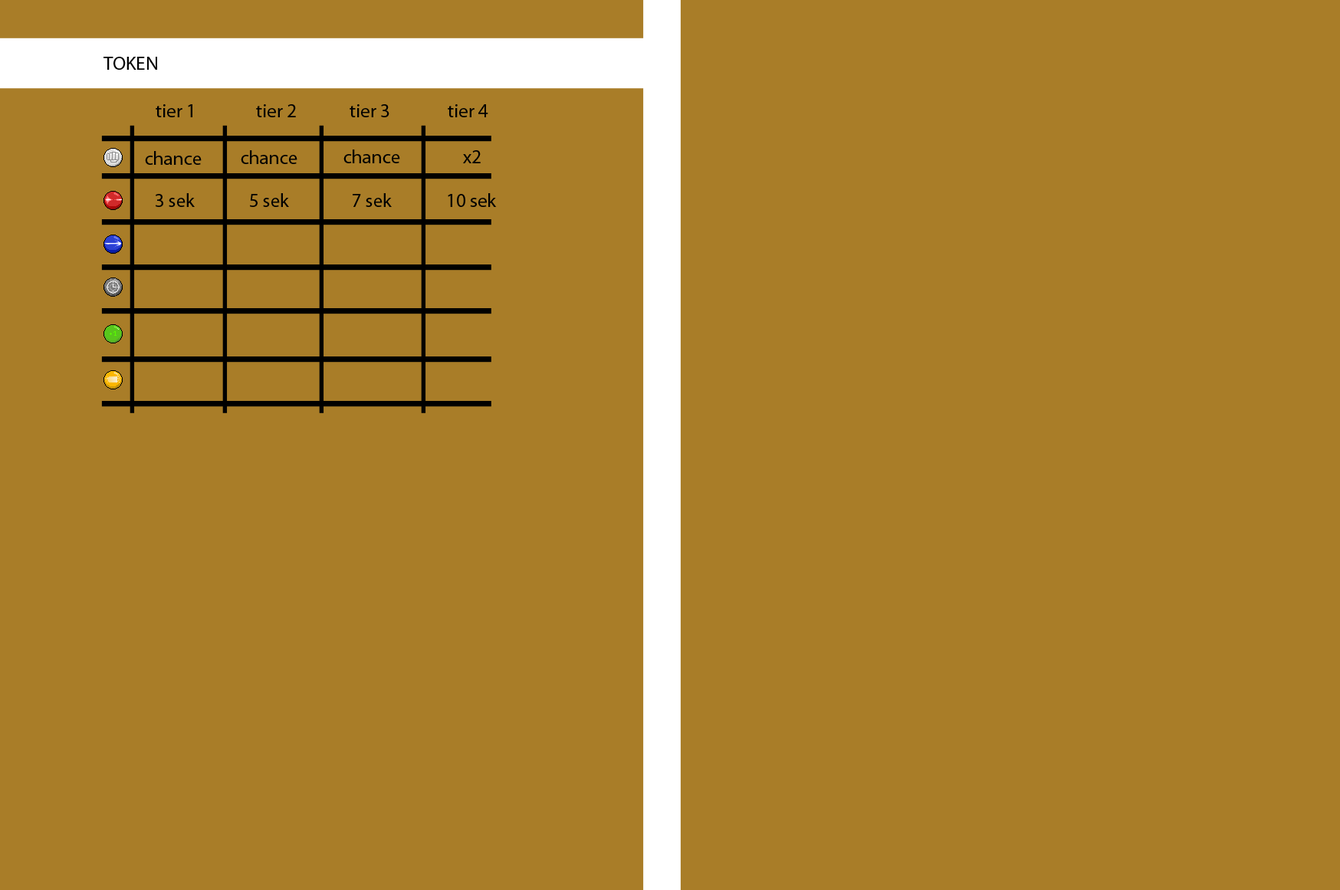
<style>
.page{position:relative;width:1340px;height:890px;background:#a97d28}
.page>*{position:absolute;margin:0}
.t1{font:19.2px "MyriadPro-Regular";color:#000000}
</style>
<div class="page">
<p class="t1" style="left:103px;top:57px;width:54px;height:13px">TOKEN</p>
<p class="t1" style="left:156px;top:104px;width:36px;height:13px">tier 1</p>
<p class="t1" style="left:256px;top:104px;width:40px;height:13px">tier 2</p>
<p class="t1" style="left:350px;top:104px;width:39px;height:13px">tier 3</p>
<p class="t1" style="left:448px;top:104px;width:40px;height:13px">tier 4</p>
<p class="t1" style="left:343px;top:149px;width:57px;height:14px">chance</p>
<p class="t1" style="left:145px;top:151px;width:57px;height:14px">chance</p>
<p class="t1" style="left:241px;top:150px;width:56px;height:14px">chance</p>
<p class="t1" style="left:463px;top:150px;width:18px;height:13px">x2</p>
<p class="t1" style="left:156px;top:193px;width:39px;height:14px">3 sek</p>
<p class="t1" style="left:250px;top:193px;width:39px;height:14px">5 sek</p>
<p class="t1" style="left:353px;top:193px;width:39px;height:14px">7 sek</p>
<p class="t1" style="left:448px;top:193px;width:49px;height:14px">10 sek</p>
</div>
